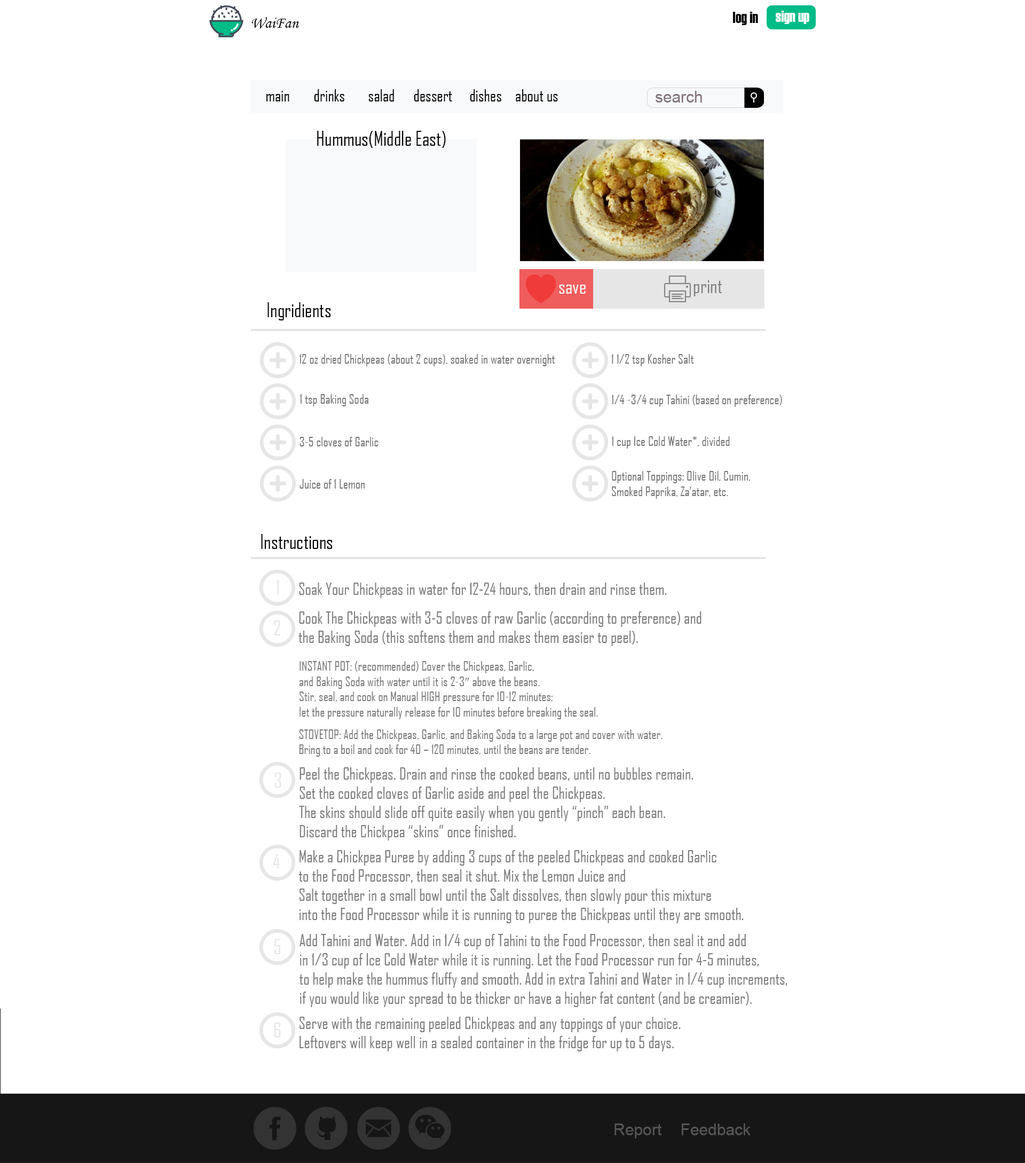
<style>
.page{position:relative;width:1025px;height:1163px;background:#ffffff}
.page>*{position:absolute;margin:0}
.t1{font:16px "MonotypeCorsiva";color:#000000}
.t2{font:16px "Haettenschweiler";color:#000000}
.t3{font:16px "Haettenschweiler";color:#ffffff}
.t4{font:16px "AgencyFB-Reg";color:#000000}
.t5{font:19.2px "AgencyFB-Reg";color:#000000}
.t6{font:19.2px "AgencyFB-Reg";color:#ffffff}
.t7{font:12.8px "AgencyFB-Reg";color:#767676}
.t8{font:16px "AgencyFB-Reg";color:#7c7c7c}
.t9{font:12.8px "AgencyFB-Reg";color:#7c7c7c}
.t10{font:12.8px "TimesNewRomanPSMT";color:#7c7c7c}
.t11{font:19.2px "AgencyFB-Reg";color:#e6e6e6}
.t12{font:16px "ArialMT";color:#575757}
</style>
<div class="page">
<p class="t1" style="left:252px;top:17px;width:48px;height:12px">WaiFan</p>
<p class="t2" style="left:733px;top:12px;width:25px;height:13px">log in</p>
<p class="t3" style="left:776px;top:11px;width:34px;height:13px">sign up</p>
<p class="t4" style="left:314px;top:89px;width:30px;height:12px">drinks</p>
<p class="t4" style="left:368px;top:89px;width:26px;height:12px">salad</p>
<p class="t4" style="left:414px;top:89px;width:38px;height:12px">dessert</p>
<p class="t4" style="left:470px;top:89px;width:31px;height:12px">dishes</p>
<p class="t4" style="left:516px;top:89px;width:42px;height:12px">about us</p>
<p class="t4" style="left:266px;top:91px;width:23px;height:10px">main</p>
<p class="t5" style="left:317px;top:131px;width:129px;height:17px">Hummus(Middle East)</p>
<p class="t6" style="left:559px;top:285px;width:27px;height:9px">save</p>
<p class="t5" style="left:268px;top:302px;width:63px;height:18px">Ingridients</p>
<p class="t7" style="left:300px;top:354px;width:255px;height:12px">12 oz dried Chickpeas (about 2 cups), soaked in water overnight</p>
<p class="t7" style="left:611px;top:354px;width:83px;height:12px">1 1/2 tsp Kosher Salt</p>
<p class="t7" style="left:300px;top:394px;width:68px;height:12px">1 tsp Baking Soda</p>
<p class="t7" style="left:612px;top:395px;width:170px;height:12px">1/4 -3/4 cup Tahini (based on preference)</p>
<p class="t7" style="left:300px;top:437px;width:79px;height:9px">3-5 cloves of Garlic</p>
<p class="t7" style="left:612px;top:436px;width:118px;height:13px">1 cup Ice Cold Water*, divided</p>
<p class="t7" style="left:612px;top:471px;width:138px;height:28px;text-align:right">Optional Toppings: Olive Oil, Cumin, <br>Smoked Paprika, Za’atar, etc.</p>
<p class="t7" style="left:300px;top:479px;width:65px;height:10px">Juice of 1 Lemon</p>
<p class="t5" style="left:261px;top:534px;width:72px;height:15px">Instructions</p>
<p class="t8" style="left:299px;top:583px;width:368px;height:15px">Soak Your Chickpeas in water for 12-24 hours, then drain and rinse them.</p>
<p class="t8" style="left:299px;top:611px;width:403px;height:35px;text-align:right">Cook The Chickpeas with 3-5 cloves of raw Garlic (according to preference) and <br>the Baking Soda (this softens them and makes them easier to peel).</p>
<p class="t9" style="left:300px;top:661px;width:298px;height:58px;text-align:right">INSTANT POT: (recommended) Cover the Chickpeas, Garlic, <br>and Baking Soda with water until it is 2-3<span class="t10">″</span> above the beans. <br>Stir, seal, and cook on Manual HIGH pressure for 10-12 minutes; <br>let the pressure naturally release for 10 minutes before breaking the seal.</p>
<p class="t9" style="left:299px;top:729px;width:364px;height:28px;text-align:right">STOVETOP: Add the Chickpeas, Garlic, and Baking Soda to a large pot and cover with water. <br>Bring to a boil and cook for 40 – 120 minutes, until the beans are tender.</p>
<p class="t8" style="left:299px;top:767px;width:395px;height:74px;text-align:right">Peel the Chickpeas. Drain and rinse the cooked beans, until no bubbles remain. <br>Set the cooked cloves of Garlic aside and peel the Chickpeas. <br>The skins should slide off quite easily when you gently “pinch” each bean. <br>Discard the Chickpea “skins” once finished.</p>
<p class="t8" style="left:299px;top:850px;width:445px;height:73px;text-align:right">Make a Chickpea Puree by adding 3 cups of the peeled Chickpeas and cooked Garlic <br>to the Food Processor, then seal it shut. Mix the Lemon Juice and <br>Salt together in a small bowl until the Salt dissolves, then slowly pour this mixture <br>into the Food Processor while it is running to puree the Chickpeas until they are smooth.</p>
<p class="t8" style="left:300px;top:934px;width:488px;height:73px;text-align:right">Add Tahini and Water. Add in 1/4 cup of Tahini to the Food Processor, then seal it and add <br>in 1/3 cup of Ice Cold Water while it is running. Let the Food Processor run for 4-5 minutes, <br>to help make the hummus fluffy and smooth. Add in extra Tahini and Water in 1/4 cup increments, <br>if you would like your spread to be thicker or have a higher fat content (and be creamier).</p>
<p class="t11" style="left:274px;top:1023px;width:7px;height:15px">6</p>
<p class="t8" style="left:300px;top:1017px;width:381px;height:34px;text-align:right">Serve with the remaining peeled Chickpeas and any toppings of your choice. <br>Leftovers will keep well in a sealed container in the fridge for up to 5 days.</p>
<p class="t12" style="left:615px;top:1124px;width:47px;height:14px">Report</p>
<p class="t12" style="left:682px;top:1124px;width:69px;height:11px">Feedback</p>
</div>
